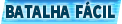
<style>
.page{position:relative;width:122px;height:24px;background:#00405d}
.page>*{position:absolute;margin:0}
.t1{font:16px "RodinNTLGPro-UB";letter-spacing:0.015em;color:#00405d;scale:0.77 1}
</style>
<div class="page">
<p class="t1" style="left:6px;top:1px;width:109px;height:18px">BATALHA FÁCIL</p>
</div>
